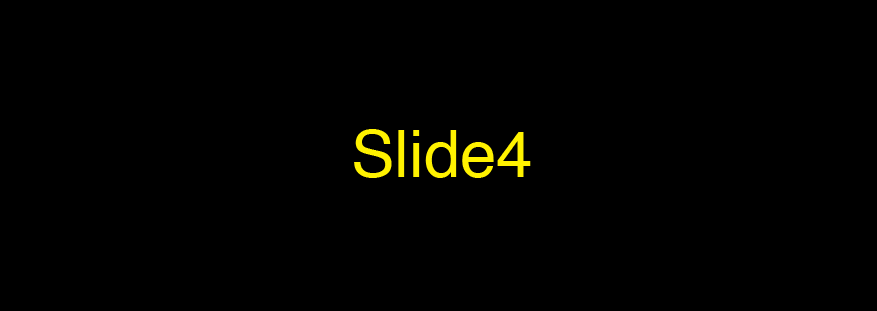
<style>
.page{position:relative;width:877px;height:311px;background:#000000}
.page>*{position:absolute;margin:0}
.t1{font:65.4px "Helvetica";color:#fff200}
</style>
<div class="page">
<p class="t1" style="left:354px;top:129px;width:177px;height:49px">Slide4</p>
</div>
